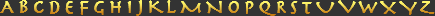
<style>
.page{position:relative;width:435px;height:16px;background:#333333}
.page>*{position:absolute;margin:0}
.t1{font:20px "HerculanumLTW01-Bold";letter-spacing:0.2em}
</style>
<div class="page">
<p class="t1" style="left:0px;top:0px;width:435px;height:16px">ABCDEFGHIJKLMNOPQRSTUVWXYZ</p>
</div>
